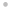
<style>
.page{position:relative;width:10px;height:10px;background:#ffffff}
.page>*{position:absolute;margin:0}
.t1{font:18px "MalgunGothicBold";letter-spacing:-0.075em;color:#bebdbd}
</style>
<div class="page">
<p class="t1" style="left:3px;top:2px;width:5px;height:5px">•</p>
</div>
